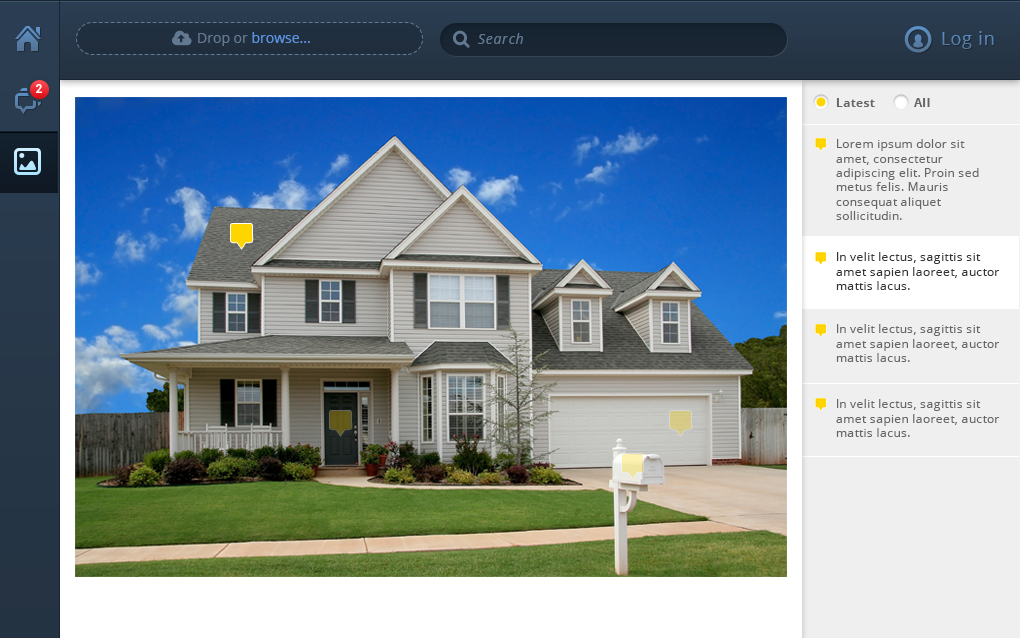
<style>
.page{position:relative;width:1020px;height:638px}
.page>*{position:absolute;margin:0}
.t1{font:14px "OpenSans";color:#5c93e0}
.t2{font:14px "OpenSans";color:#627991}
.t3{font:14px "OpenSans-Italic";letter-spacing:0.05em;color:#627991}
.t4{font:18px "OpenSans";letter-spacing:0.03em;color:#5882ae}
.t5{font:12px "Roboto-Bold";letter-spacing:0.03em;color:#ffffff;text-transform:uppercase}
.t6{font:12px "OpenSans-Bold";letter-spacing:0.03em;color:#666666}
.t7{font:12px "OpenSans";letter-spacing:0.03em;color:#666666}
.t8{font:12px "OpenSans";letter-spacing:0.03em;color:#333333}
</style>
<div class="page">
<p class="t1" style="left:198px;top:32px;width:112px;height:14px"><span class="t2">Drop or </span>browse...</p>
<p class="t3" style="left:478px;top:33px;width:45px;height:11px">Search</p>
<p class="t4" style="left:942px;top:31px;width:52px;height:18px">Log in</p>
<p class="t5" style="left:36px;top:84px;width:6px;height:9px">2</p>
<p class="t6" style="left:836px;top:98px;width:39px;height:9px">Latest</p>
<p class="t6" style="left:914px;top:98px;width:16px;height:9px">All</p>
<p class="t7" style="left:836px;top:139px;width:143px;height:81px">Lorem ipsum dolor sit amet, consectetur adipiscing elit. Proin sed metus felis. Mauris consequat aliquet sollicitudin.</p>
<p class="t8" style="left:836px;top:252px;width:164px;height:38px">In velit lectus, sagittis sit amet sapien laoreet, auctor mattis lacus.</p>
<p class="t7" style="left:836px;top:324px;width:164px;height:38px">In velit lectus, sagittis sit amet sapien laoreet, auctor mattis lacus.</p>
<p class="t7" style="left:836px;top:399px;width:164px;height:38px">In velit lectus, sagittis sit amet sapien laoreet, auctor mattis lacus.</p>
</div>
